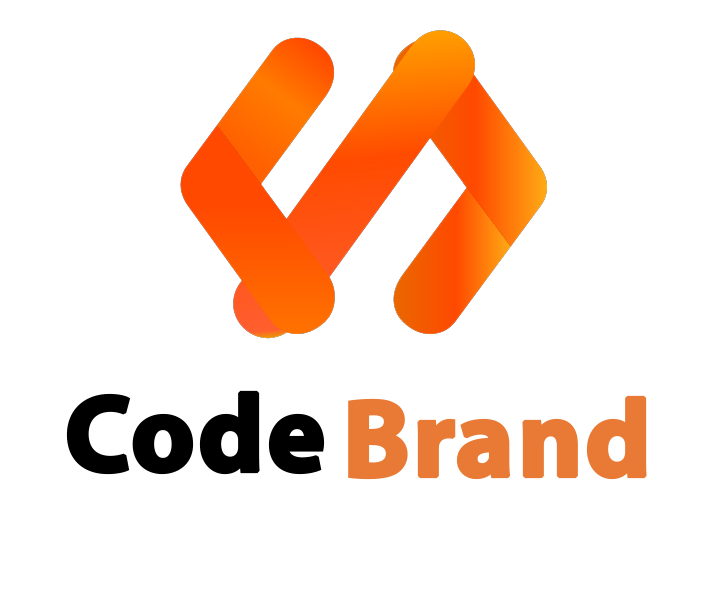
<style>
.page{position:relative;width:721px;height:597px;background:#ffffff}
.page>*{position:absolute;margin:0}
.t1{font:154.2px "MyriadArabic-Bold";color:#000000;font-weight:bold}
.t2{font:154.2px "MyriadArabic-Bold";color:#e87a35;font-weight:bold}
</style>
<div class="page">
<p class="t1" style="left:66px;top:390px;width:259px;height:85px">Code</p>
<p class="t2" style="left:348px;top:395px;width:299px;height:85px">Brand</p>
</div>
